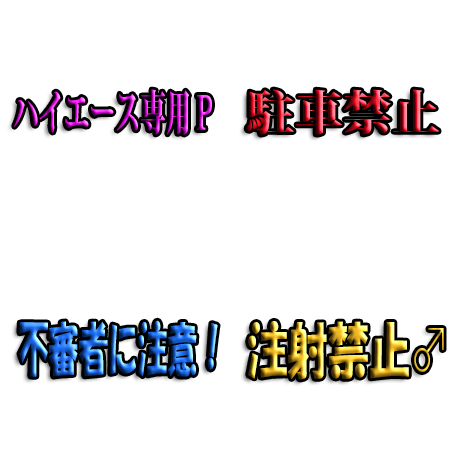
<style>
.page{position:relative;width:460px;height:460px;background:#ffffff}
.page>*{position:absolute;margin:0}
.t1{font:47.2px "KozMinPr6N-Heavy";scale:0.54 1}
.t2{font:47.2px "KozMinPr6N-Heavy"}
.t3{font:58.1px "HGSoeiKakupoptai";scale:0.51 1}
.t4{font:60.1px "HGSoeiKakupoptai";scale:0.68 1}
.t5{font:60.1px "KozMinPr6N-Heavy";scale:0.68 1}
</style>
<div class="page">
<p class="t1" style="left:14px;top:89px;width:198px;height:46px">ハイエース専用Ｐ</p>
<p class="t2" style="left:246px;top:89px;width:193px;height:46px">駐車禁止</p>
<p class="t3" style="left:19px;top:320px;width:199px;height:57px">不審者に注意！</p>
<p class="t4" style="left:248px;top:321px;width:196px;height:59px">注射禁止<span class="t5">♂</span></p>
</div>
